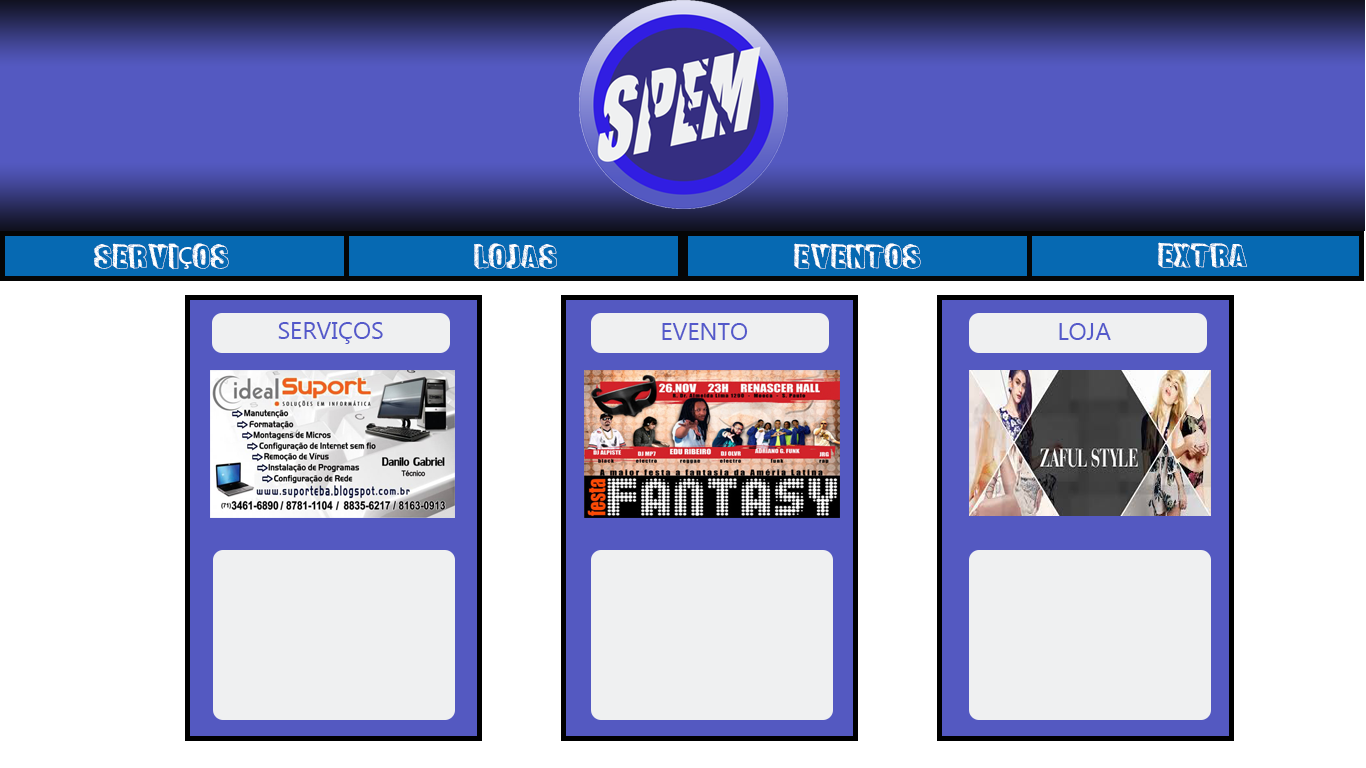
<style>
.page{position:relative;width:1366px;height:768px;background:#ffffff}
.page>*{position:absolute;margin:0}
.t1{font:24px "FunSized";color:#ffffff}
.t2{font:24px "MyriadPro-Regular";color:#ffffff}
.t3{font:24px "Gadugi";color:#5459ca}
</style>
<div class="page">
<p class="t1" style="left:94px;top:243px;width:135px;height:27px">SERVI<span class="t2">Ç</span>OS</p>
<p class="t1" style="left:474px;top:243px;width:83px;height:26px">LOJAS</p>
<p class="t1" style="left:794px;top:243px;width:127px;height:26px">EVENTOS</p>
<p class="t1" style="left:1158px;top:242px;width:89px;height:26px">EXTRA</p>
<p class="t3" style="left:278px;top:322px;width:105px;height:22px">SERVIÇOS</p>
<p class="t3" style="left:662px;top:323px;width:86px;height:17px">EVENTO</p>
<p class="t3" style="left:1059px;top:323px;width:52px;height:17px">LOJA</p>
</div>
